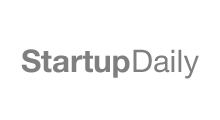
<style>
.page{position:relative;width:220px;height:120px;background:#ffffff}
.page>*{position:absolute;margin:0}
.t1{font:31.2px "HelveticaNeue-Bold";color:#7f7f7f}
.t2{font:31.2px "HelveticaNeue";color:#7f7f7f}
</style>
<div class="page">
<p class="t1" style="left:21px;top:49px;width:178px;height:30px">Startup<span class="t2">Daily</span></p>
</div>
